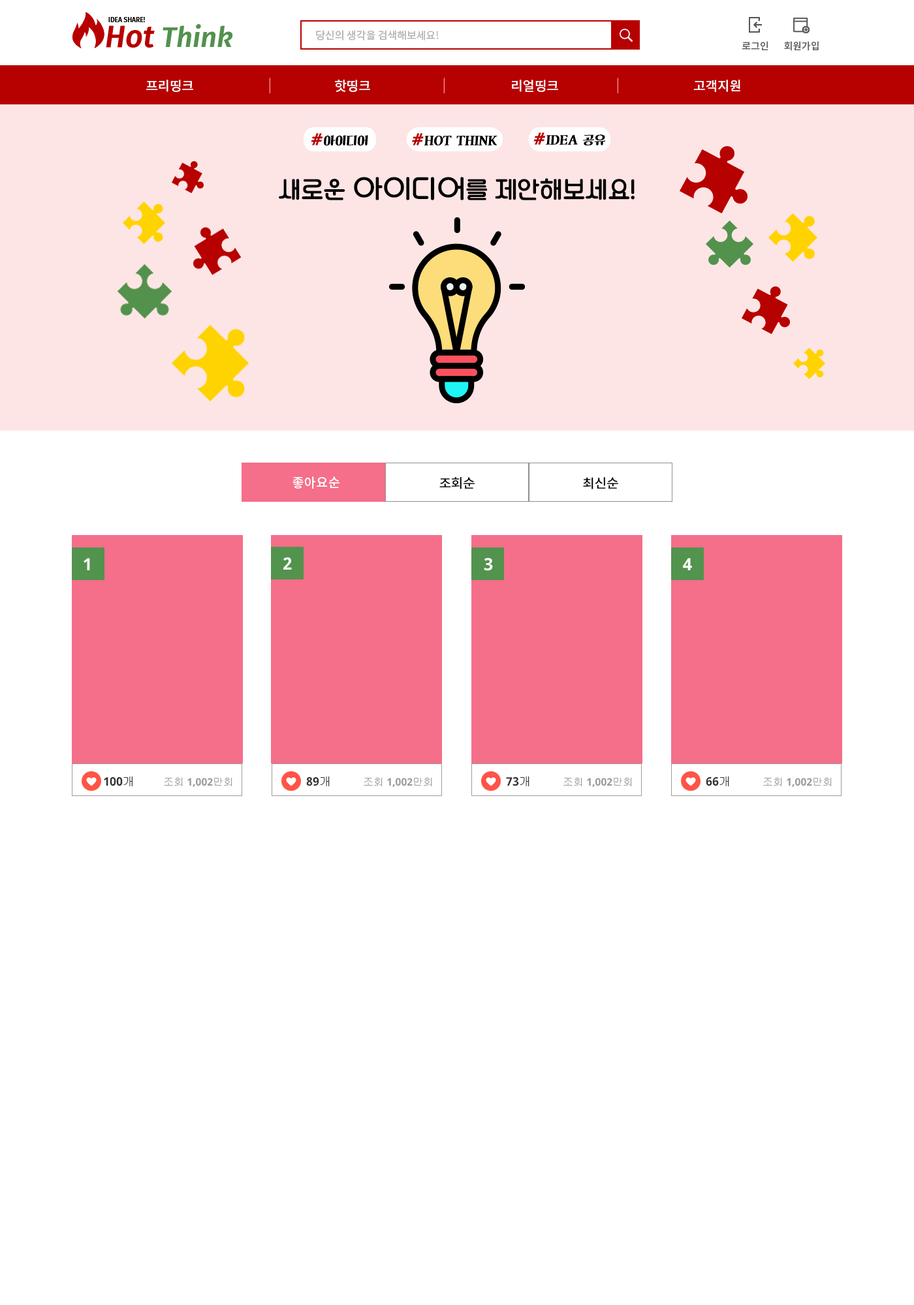
<style>
.page{position:relative;width:914px;height:1305px;background:#ffffff}
.page>*{position:absolute;margin:0}
.t1{font:10.4px "NotoSansKR-Medium";color:#b6b6b6}
.t2{font:9.8px "NotoSansKR-Medium";color:#5a5a5a}
.t3{font:13.7px "NotoSansKR-Thin";color:#ff9b9b}
.t4{font:13.1px "NotoSansKR-Medium";color:#ffffff}
.t5{font:11.7px "KoreanJMDB-R";color:#000000}
.t6{font:15.7px "Yj-CHMSOOT-Bold";color:#b70000}
.t7{font:23.5px "TTSunflowerR";color:#000000}
.t8{font:26.1px "TTSunflowerR";color:#000000}
.t9{font:13.1px "NotoSansKR-Medium";color:#000000}
.t10{font:17px "NotoSans-Bold";color:#fefefe}
.t11{font:11.7px "NotoSans-Bold";color:#333333}
.t12{font:11.7px "Gulim";color:#333333}
.t13{font:10.4px "NotoSans-Bold";color:#9a9a9a}
.t14{font:10.4px "Gulim";color:#9a9a9a}
</style>
<div class="page">
<p class="t1" style="left:316px;top:30px;width:123px;height:10px">당신의 생각을 검색해보세요!</p>
<p class="t2" style="left:741px;top:41px;width:27px;height:9px">로그인</p>
<p class="t2" style="left:784px;top:41px;width:34px;height:10px">회원가입</p>
<p class="t3" style="left:269px;top:78px;width:1px;height:15px">|</p>
<p class="t3" style="left:443px;top:78px;width:1px;height:15px">|</p>
<p class="t3" style="left:617px;top:78px;width:1px;height:15px">|</p>
<p class="t4" style="left:146px;top:80px;width:47px;height:12px">프리띵크</p>
<p class="t4" style="left:335px;top:80px;width:35px;height:12px">핫띵크</p>
<p class="t4" style="left:512px;top:80px;width:46px;height:12px">리얼띵크</p>
<p class="t4" style="left:693px;top:80px;width:47px;height:12px">고객지원</p>
<p class="t5" style="left:311px;top:133px;width:57px;height:13px"><span class="t6">#</span>아이디어</p>
<p class="t5" style="left:412px;top:133px;width:85px;height:13px"><span class="t6">#</span>HOT THINK</p>
<p class="t5" style="left:533px;top:132px;width:72px;height:14px"><span class="t6">#</span>IDEA 공유</p>
<p class="t7" style="left:279px;top:177px;width:355px;height:23px">새로운 <span class="t8">아이디어</span>를 제안해보세요!</p>
<p class="t4" style="left:292px;top:476px;width:47px;height:13px">좋아요순</p>
<p class="t9" style="left:439px;top:477px;width:35px;height:12px">조회순</p>
<p class="t9" style="left:583px;top:477px;width:35px;height:12px">최신순</p>
<p class="t10" style="left:84px;top:558px;width:6px;height:12px">1</p>
<p class="t10" style="left:283px;top:557px;width:9px;height:13px">2</p>
<p class="t10" style="left:484px;top:558px;width:9px;height:13px">3</p>
<p class="t10" style="left:683px;top:558px;width:9px;height:12px">4</p>
<p class="t11" style="left:104px;top:777px;width:28px;height:9px">100<span class="t12">개</span></p>
<p class="t13" style="left:164px;top:778px;width:68px;height:9px"><span class="t14">조회</span> 1,002<span class="t14">만회</span></p>
<p class="t11" style="left:306px;top:777px;width:24px;height:9px">89<span class="t12">개</span></p>
<p class="t13" style="left:363px;top:778px;width:69px;height:9px"><span class="t14">조회</span> 1,002<span class="t14">만회</span></p>
<p class="t11" style="left:506px;top:777px;width:23px;height:9px">73<span class="t12">개</span></p>
<p class="t13" style="left:563px;top:778px;width:69px;height:9px"><span class="t14">조회</span> 1,002<span class="t14">만회</span></p>
<p class="t11" style="left:705px;top:777px;width:24px;height:9px">66<span class="t12">개</span></p>
<p class="t13" style="left:763px;top:778px;width:68px;height:9px"><span class="t14">조회</span> 1,002<span class="t14">만회</span></p>
</div>
